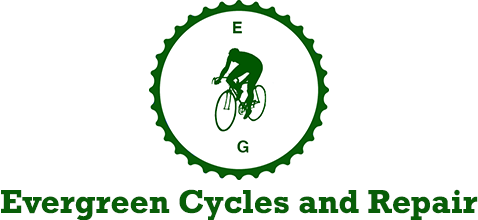
<style>
.page{position:relative;width:478px;height:220px;background:#ffffff}
.page>*{position:absolute;margin:0}
.t1{font:33.3px "Rockwell-Bold";color:#085e08}
</style>
<div class="page">
<p class="t1" style="left:1px;top:189px;width:477px;height:32px">Evergreen Cycles and Repair</p>
</div>
